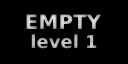
<style>
.page{position:relative;width:128px;height:64px;background:#000000}
.page>*{position:absolute;margin:0}
.t1{font:20px "BitstreamVeraSans-Bold";color:#c1c1c1}
.t2{font:18px "BitstreamVeraSans-Bold";color:#b3b3b3}
</style>
<div class="page">
<p class="t1" style="left:26px;top:14px;width:76px;height:15px">EMPTY</p>
<p class="t2" style="left:31px;top:34px;width:66px;height:15px">level 1</p>
</div>
